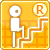
<style>
.page{position:relative;width:50px;height:50px}
.page>*{position:absolute;margin:0}
.t1{font:13.4px "AmiraParadiso";color:#fa830c}
</style>
<div class="page">
<p class="t1" style="left:36px;top:5px;width:8px;height:9px">R</p>
</div>
